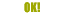
<style>
.page{position:relative;width:64px;height:16px;background:#ffffff}
.page>*{position:absolute;margin:0}
.t1{font:12px "Impact";color:#9ea800}
</style>
<div class="page">
<p class="t1" style="left:24px;top:2px;width:16px;height:11px">OK!</p>
</div>
